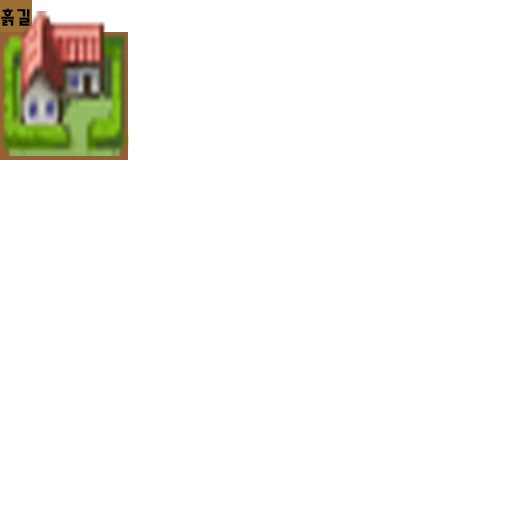
<style>
.page{position:relative;width:512px;height:512px;background:#ffffff}
.page>*{position:absolute;margin:0}
.t1{font:18.7px "HaanYHeadM";color:#000000}
</style>
<div class="page">
<p class="t1" style="left:1px;top:8px;width:29px;height:18px">흙길</p>
</div>
